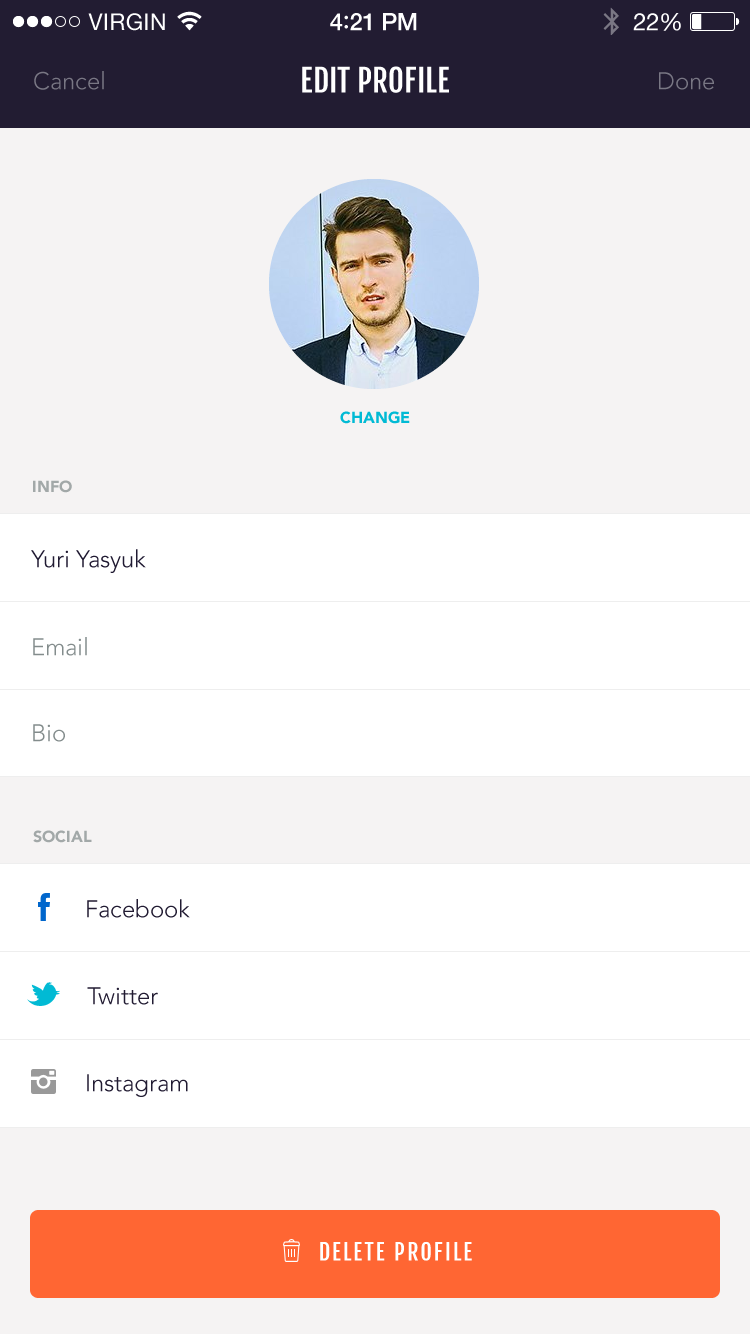
<style>
.page{position:relative;width:750px;height:1334px;background:#f5f3f3}
.page>*{position:absolute;margin:0}
.t1{font:24px "Avenir-Light";color:#797784}
.t2{font:31px "FjallaOne-Regular";color:#ffffff}
.t3{font:16px "Avenir-Black";color:#01bad4}
.t4{font:16px "Avenir-Black";color:#a2a8a8}
.t5{font:24px "Avenir-Light";color:#201a32}
.t6{font:24px "Avenir-Light";color:#838c8c}
.t7{font:24px "Avenir-Light";color:#211b32}
.t8{font:22px "FjallaOne-Regular";letter-spacing:0.1em;color:#ffffff}
</style>
<div class="page">
<p class="t1" style="left:34px;top:71px;width:70px;height:19px">Cancel</p>
<p class="t2" style="left:302px;top:66px;width:147px;height:27px">EDIT PROFILE</p>
<p class="t1" style="left:659px;top:72px;width:55px;height:18px">Done</p>
<p class="t3" style="left:340px;top:411px;width:70px;height:13px">CHANGE</p>
<p class="t4" style="left:33px;top:480px;width:39px;height:13px">INFO</p>
<p class="t5" style="left:31px;top:549px;width:115px;height:24px">Yuri Yasyuk</p>
<p class="t6" style="left:33px;top:637px;width:54px;height:19px">Email</p>
<p class="t6" style="left:33px;top:724px;width:32px;height:18px">Bio</p>
<p class="t4" style="left:33px;top:830px;width:59px;height:13px">SOCIAL</p>
<p class="t7" style="left:87px;top:899px;width:103px;height:19px">Facebook</p>
<p class="t7" style="left:87px;top:987px;width:71px;height:18px">Twitter</p>
<p class="t7" style="left:87px;top:1074px;width:101px;height:23px">Instagram</p>
<p class="t8" style="left:320px;top:1241px;width:152px;height:20px">DELETE PROFILE</p>
</div>
